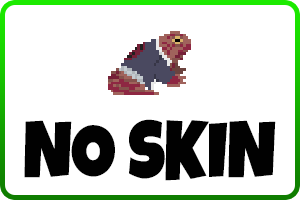
<style>
.page{position:relative;width:300px;height:200px;background:#ffffff}
.page>*{position:absolute;margin:0}
.t1{font:80.5px "LuckiestGuy-Regular";letter-spacing:-0.01em;color:#010101;text-transform:uppercase;scale:0.87 1}
</style>
<div class="page">
<p class="t1" style="left:24px;top:119px;width:252px;height:62px">no skin</p>
</div>
